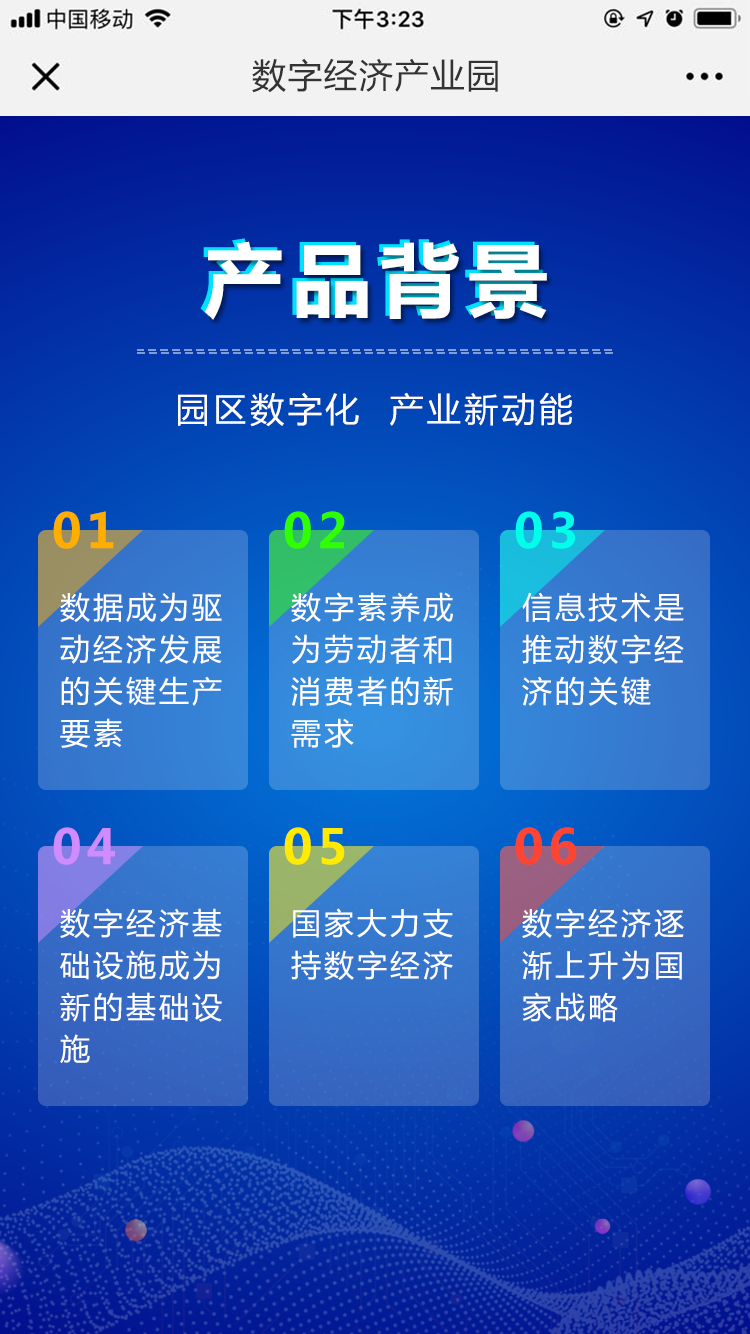
<style>
.page{position:relative;width:750px;height:1334px}
.page>*{position:absolute;margin:0}
.t1{font:34px "MicrosoftYaHei";letter-spacing:0.05em;color:#333333}
.t2{font:80px "MicrosoftYaHei-Bold";letter-spacing:0.1em}
.t3{font:80px "MicrosoftYaHei-Bold";letter-spacing:0.1em;color:#ffffff}
.t4{font:34px "MicrosoftYaHei";letter-spacing:0.1em;color:#ffffff}
.t5{font:48px "MicrosoftYaHei-Bold";letter-spacing:0.1em;color:#ffae00}
.t6{font:48px "MicrosoftYaHei-Bold";letter-spacing:0.1em;color:#30ff00}
.t7{font:48px "MicrosoftYaHei-Bold";letter-spacing:0.1em;color:#00ffea}
.t8{font:30px/42px "MicrosoftYaHei";letter-spacing:0.1em;color:#ffffff}
.t9{font:48px "MicrosoftYaHei-Bold";letter-spacing:0.1em;color:#d08cff}
.t10{font:48px "MicrosoftYaHei-Bold";letter-spacing:0.1em;color:#ffea00}
.t11{font:48px "MicrosoftYaHei-Bold";letter-spacing:0.1em;color:#ff4532}
</style>
<div class="page">
<p class="t1" style="left:252px;top:58px;width:246px;height:35px">数字经济产业园</p>
<p class="t2" style="left:200px;top:238px;width:343px;height:79px">产品背景</p>
<p class="t3" style="left:205px;top:241px;width:342px;height:79px">产品背景</p>
<p class="t4" style="left:178px;top:392px;width:394px;height:35px">园区数字化  产业新动能</p>
<p class="t5" style="left:53px;top:511px;width:61px;height:38px">01</p>
<p class="t6" style="left:284px;top:511px;width:61px;height:38px">02</p>
<p class="t7" style="left:515px;top:511px;width:60px;height:38px">03</p>
<p class="t8" style="left:60px;top:592px;width:162px;height:156px">数据成为驱<br>动经济发展<br>的关键生产<br>要素</p>
<p class="t8" style="left:291px;top:592px;width:162px;height:156px">数字素养成<br>为劳动者和<br>消费者的新<br>需求</p>
<p class="t8" style="left:522px;top:592px;width:162px;height:114px">信息技术是<br>推动数字经<br>济的关键</p>
<p class="t9" style="left:53px;top:827px;width:62px;height:38px">04</p>
<p class="t10" style="left:284px;top:827px;width:61px;height:38px">05</p>
<p class="t11" style="left:515px;top:827px;width:62px;height:38px">06</p>
<p class="t8" style="left:60px;top:908px;width:162px;height:155px">数字经济基<br>础设施成为<br>新的基础设<br>施</p>
<p class="t8" style="left:291px;top:908px;width:162px;height:72px">国家大力支<br>持数字经济</p>
<p class="t8" style="left:522px;top:908px;width:162px;height:114px">数字经济逐<br>渐上升为国<br>家战略</p>
</div>
